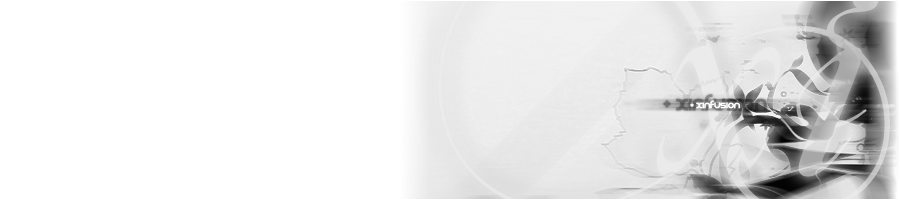
<style>
.page{position:relative;width:900px;height:200px;background:#ffffff}
.page>*{position:absolute;margin:0}
.t1{font:25px "REZ";font-weight:bold}
.t2{font:12px "REZ";color:#ffffff;font-weight:bold}
</style>
<div class="page">
<p class="t1" style="left:663px;top:94px;width:104px;height:17px">1xinfusion</p>
<p class="t2" style="left:690px;top:100px;width:50px;height:9px">1xinfusion</p>
</div>
